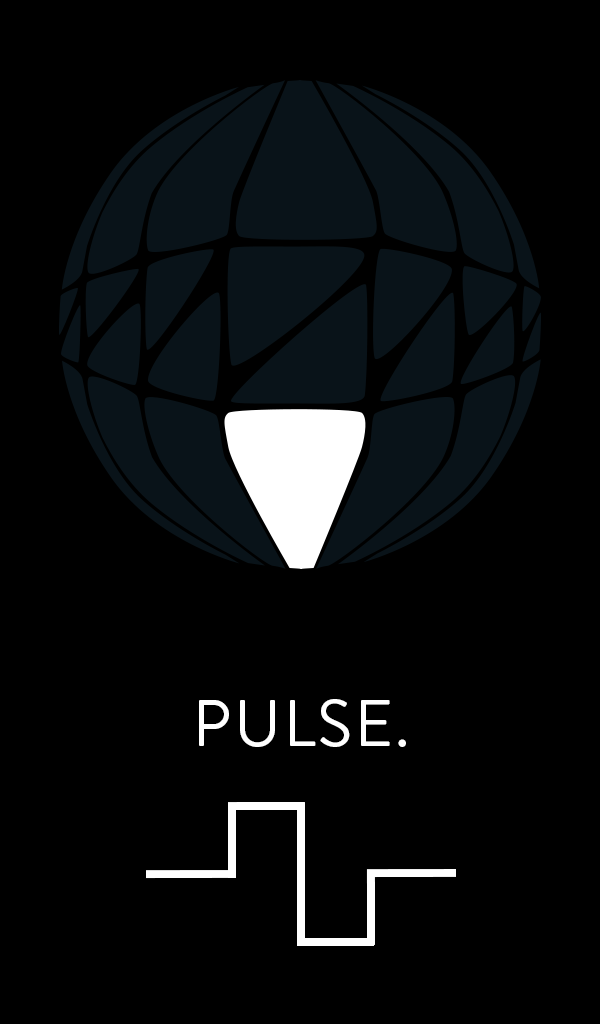
<style>
.page{position:relative;width:600px;height:1024px;background:#000000}
.page>*{position:absolute;margin:0}
.t1{font:66.3px "BrandonGrotesque-Regular";letter-spacing:0.025em;color:#ffffff}
</style>
<div class="page">
<p class="t1" style="left:199px;top:699px;width:207px;height:48px">PULSE.</p>
</div>
